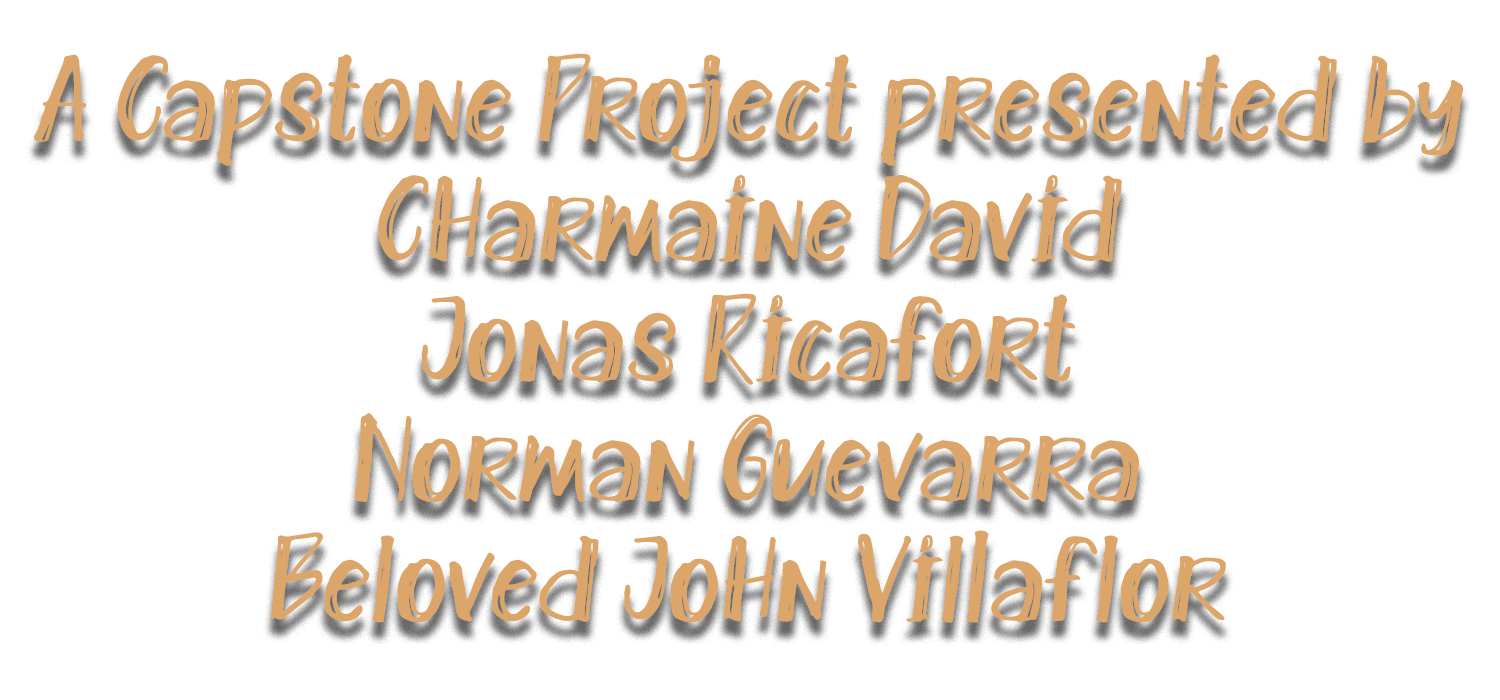
<style>
.page{position:relative;width:1500px;height:700px;background:#ffffff}
.page>*{position:absolute;margin:0}
.t1{font:100px "BurnWood-Regular";color:#dca56a}
</style>
<div class="page">
<p class="t1" style="left:34px;top:53px;width:1430px;height:570px;text-align:center">A Capstone Project presented by<br>Charmaine David<br>Jonas Ricafort<br>Norman Guevarra<br>Beloved John Villaflor</p>
</div>
